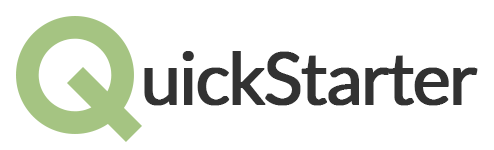
<style>
.page{position:relative;width:494px;height:150px;background:#ffffff}
.page>*{position:absolute;margin:0}
.t1{font:72px "Lato-Regular";letter-spacing:-0.05em;color:#323232;font-weight:bold}
</style>
<div class="page">
<p class="t1" style="left:144px;top:51px;width:334px;height:55px">uickStarter</p>
</div>
